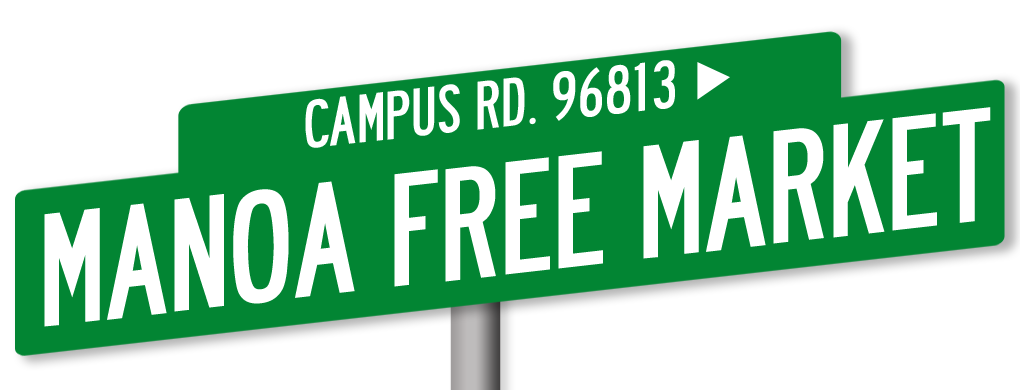
<style>
.page{position:relative;width:1020px;height:390px;background:#ffffff}
.page>*{position:absolute;margin:0}
.t1{font:60px "Roadway";color:#ffffff}
.t2{font:140px "Roadway";color:#ffffff}
</style>
<div class="page">
<p class="t1" style="left:305px;top:60px;width:370px;height:88px;rotate:-6deg">CAMPUS RD. 96813</p>
<p class="t2" style="left:44px;top:107px;width:947px;height:220px;rotate:-6deg">MANOA FREE MARKET</p>
</div>
